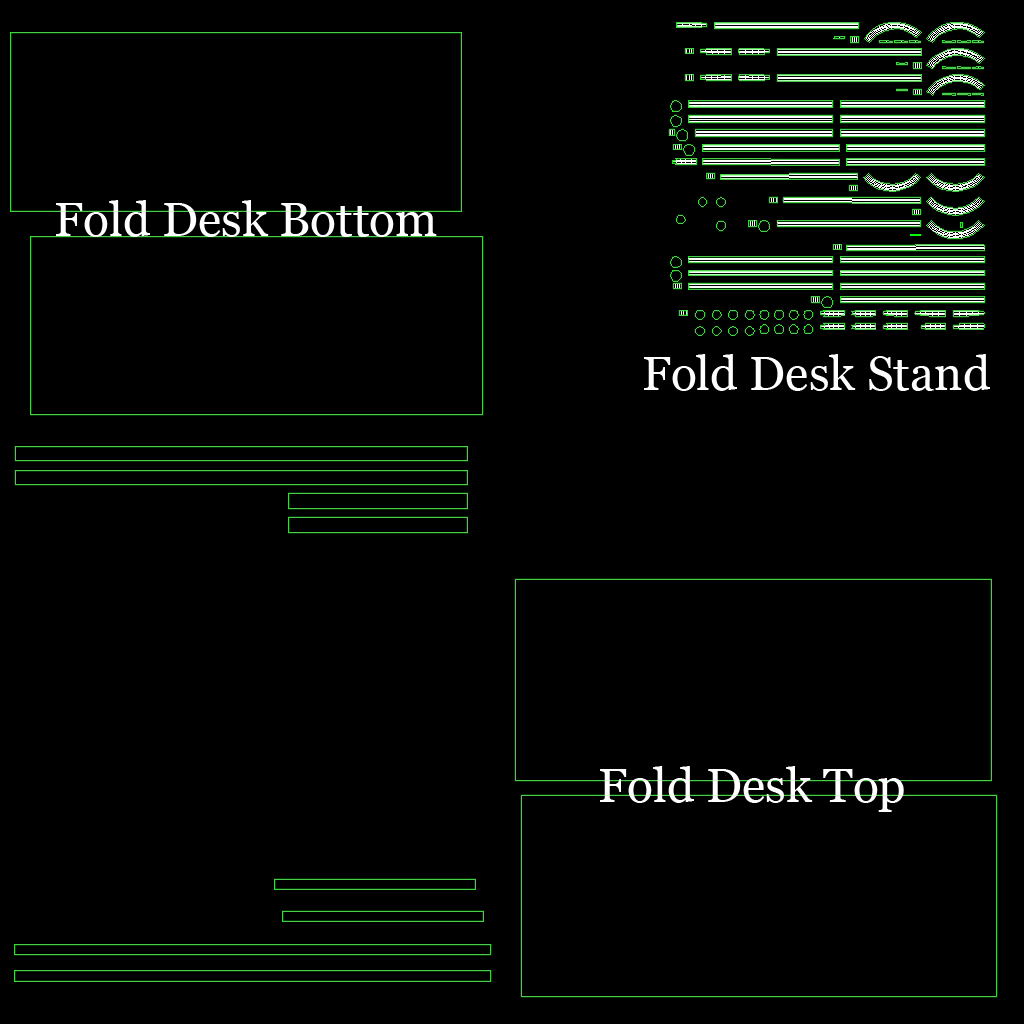
<style>
.page{position:relative;width:1024px;height:1024px;background:#000000}
.page>*{position:absolute;margin:0}
.t1{font:48px "Georgia";color:#ffffff}
</style>
<div class="page">
<p class="t1" style="left:56px;top:200px;width:381px;height:37px">Fold Desk Bottom</p>
<p class="t1" style="left:644px;top:354px;width:346px;height:37px">Fold Desk Stand</p>
<p class="t1" style="left:600px;top:766px;width:304px;height:46px">Fold Desk Top</p>
</div>
